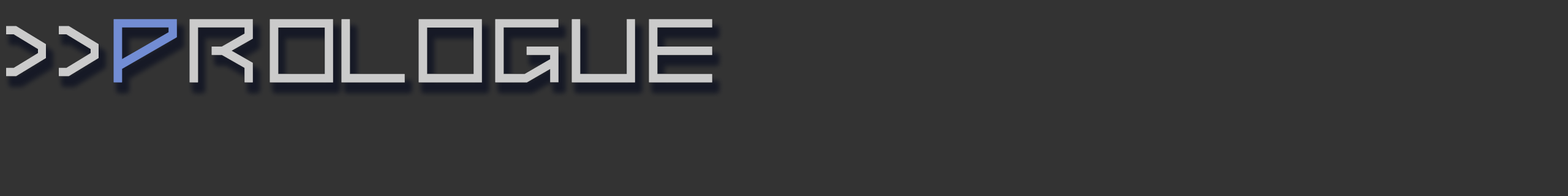
<style>
.page{position:relative;width:1568px;height:196px;background:#333333}
.page>*{position:absolute;margin:0}
.t1{font:71.7px "7THDR2020ThinRegular";letter-spacing:0.05em;color:#cbcbcb;font-weight:bold}
.t2{font:71.7px "7THDR2020ThinRegular";letter-spacing:0.1em;color:#cbcbcb;font-weight:bold;scale:0.95 1}
.t3{font:71.7px "7THDR2020ThinRegular";letter-spacing:0.11em;color:#cbcbcb;font-weight:bold;scale:0.95 1}
.t4{font:71.7px "7THDR2020ThinRegular";letter-spacing:0.04em;color:#cbcbcb;font-weight:bold}
.t5{font:71.7px "7THDR2020ThinRegular";letter-spacing:0.1em;color:#cbcbcb;font-weight:bold}
.t6{font:71.7px "7THDR2020ThinRegular";letter-spacing:-0.025em;color:#cbcbcb;font-weight:bold}
.t7{font:71.7px "7THDR2020ThinRegular";letter-spacing:0.03em;color:#cbcbcb;font-weight:bold}
</style>
<div class="page">
<p class="t1" style="left:6px;top:19px;width:706px;height:64px"><span class="t2">&gt;</span><span class="t3">&gt;</span><span class="t4">P</span><span class="t5">R</span><span class="t6">O</span>LOGU<span class="t7">E</span></p>
</div>
